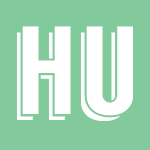
<style>
.page{position:relative;width:150px;height:150px;background:#82ca9c}
.page>*{position:absolute;margin:0}
.t1{font:125px "Langdon";color:#ffffff}
</style>
<div class="page">
<p class="t1" style="left:17px;top:26px;width:116px;height:95px">hu</p>
</div>
